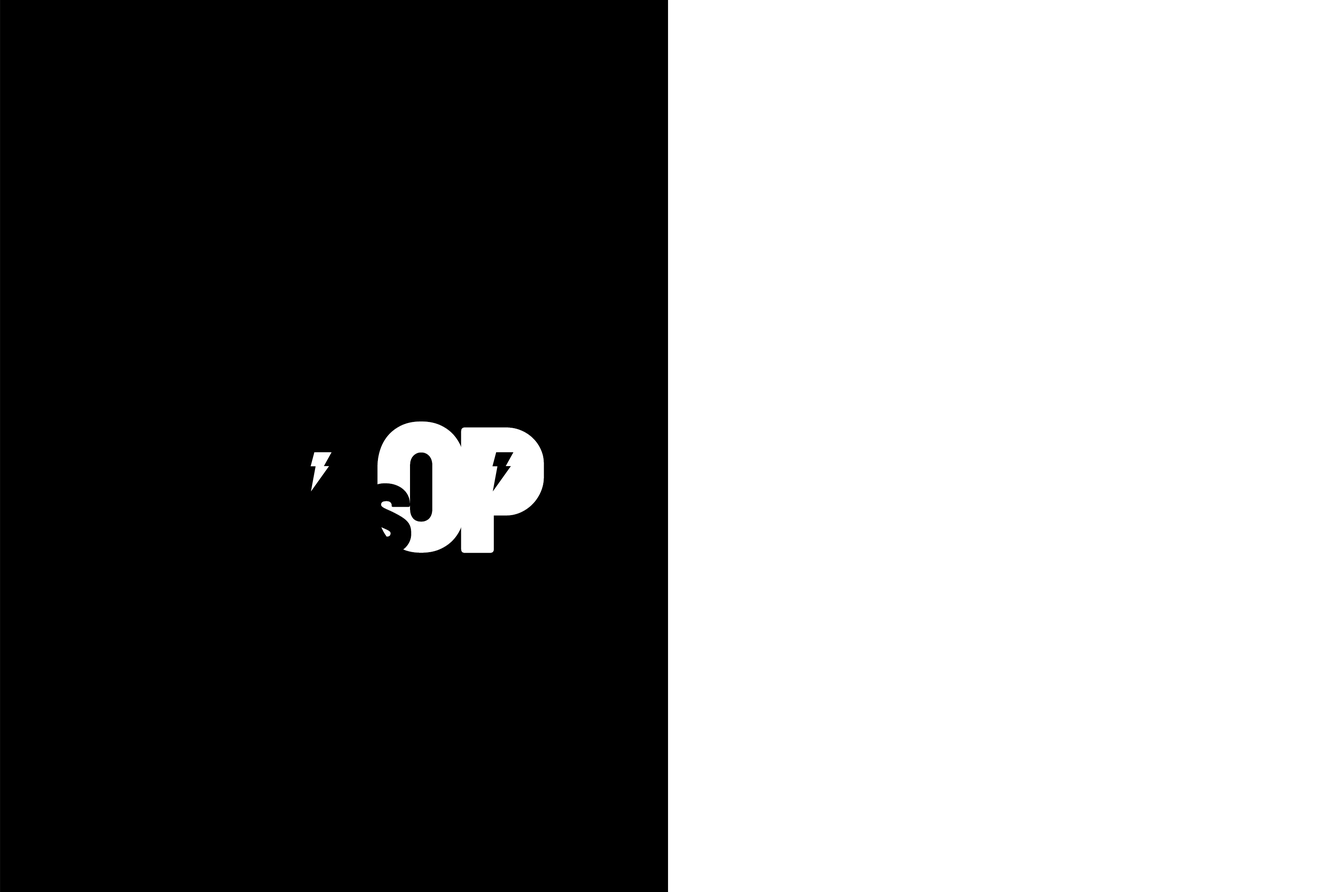
<style>
.page{position:relative;width:1337px;height:892px;background:#ffffff}
.page>*{position:absolute;margin:0}
.t1{font:168.5px "CocogooseCondensedTrial-Regular";letter-spacing:-0.115em;color:#ffffff}
.t2{font:107.4px "CocogooseCondensedTrial-Regular";letter-spacing:-0.05em;color:#000000}
</style>
<div class="page">
<p class="t1" style="left:378px;top:421px;width:166px;height:132px">OP</p>
<p class="t2" style="left:336px;top:463px;width:75px;height:92px">is</p>
</div>
